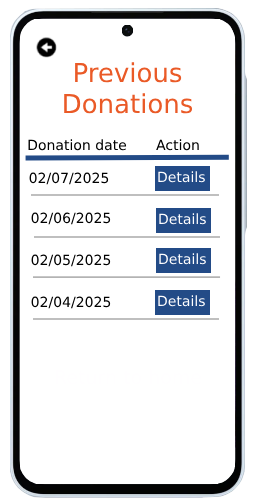
<style>
.page{position:relative;width:257px;height:502px;background:#ffffff}
.page>*{position:absolute;margin:0}
.t1{font:26px "Arial";color:#ea5a27}
.t2{font:14px "Arial";color:#000000}
</style>
<div class="page">
<p class="t1" style="left:64px;top:62px;width:129px;height:52px;text-align:center">Previous Donations</p>
<p class="t2" style="left:28px;top:139px;width:99px;height:12px">Donation date</p>
<p class="t2" style="left:156px;top:139px;width:43px;height:12px">Action</p>
<p class="t2" style="left:29px;top:172px;width:80px;height:13px">02/07/2025</p>
<p class="t2" style="left:31px;top:212px;width:80px;height:13px">02/06/2025</p>
<p class="t2" style="left:31px;top:254px;width:80px;height:13px">02/05/2025</p>
<p class="t2" style="left:31px;top:296px;width:80px;height:13px">02/04/2025</p>
</div>
